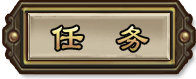
<style>
.page{position:relative;width:196px;height:79px}
.page>*{position:absolute;margin:0}
.t1{font:39.3px "LiSu";scale:0.83 1}
</style>
<div class="page">
<p class="t1" style="left:52px;top:26px;width:96px;height:25px">任  务</p>
</div>
